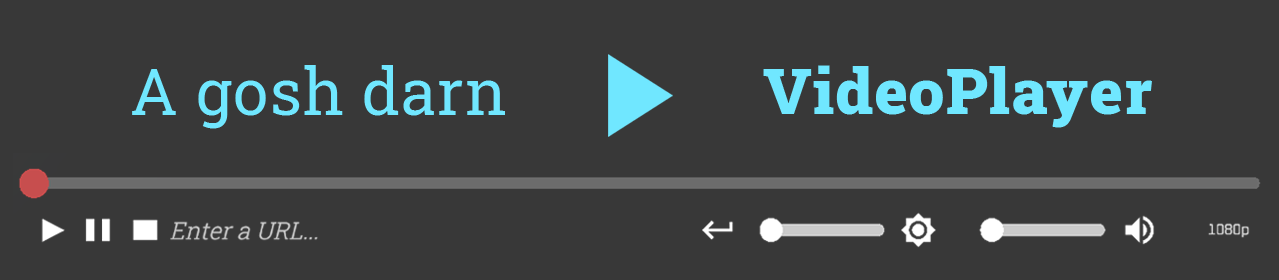
<style>
.page{position:relative;width:1279px;height:280px;background:#383838}
.page>*{position:absolute;margin:0}
.t1{font:63.7px "RobotoSlab-Regular";letter-spacing:0.02em;color:#70e7ff}
.t2{font:63.7px "RobotoSlab-Black";letter-spacing:0.02em;color:#70e7ff}
</style>
<div class="page">
<p class="t1" style="left:132px;top:65px;width:373px;height:64px">A gosh darn</p>
<p class="t2" style="left:763px;top:65px;width:389px;height:63px">VideoPlayer</p>
</div>
